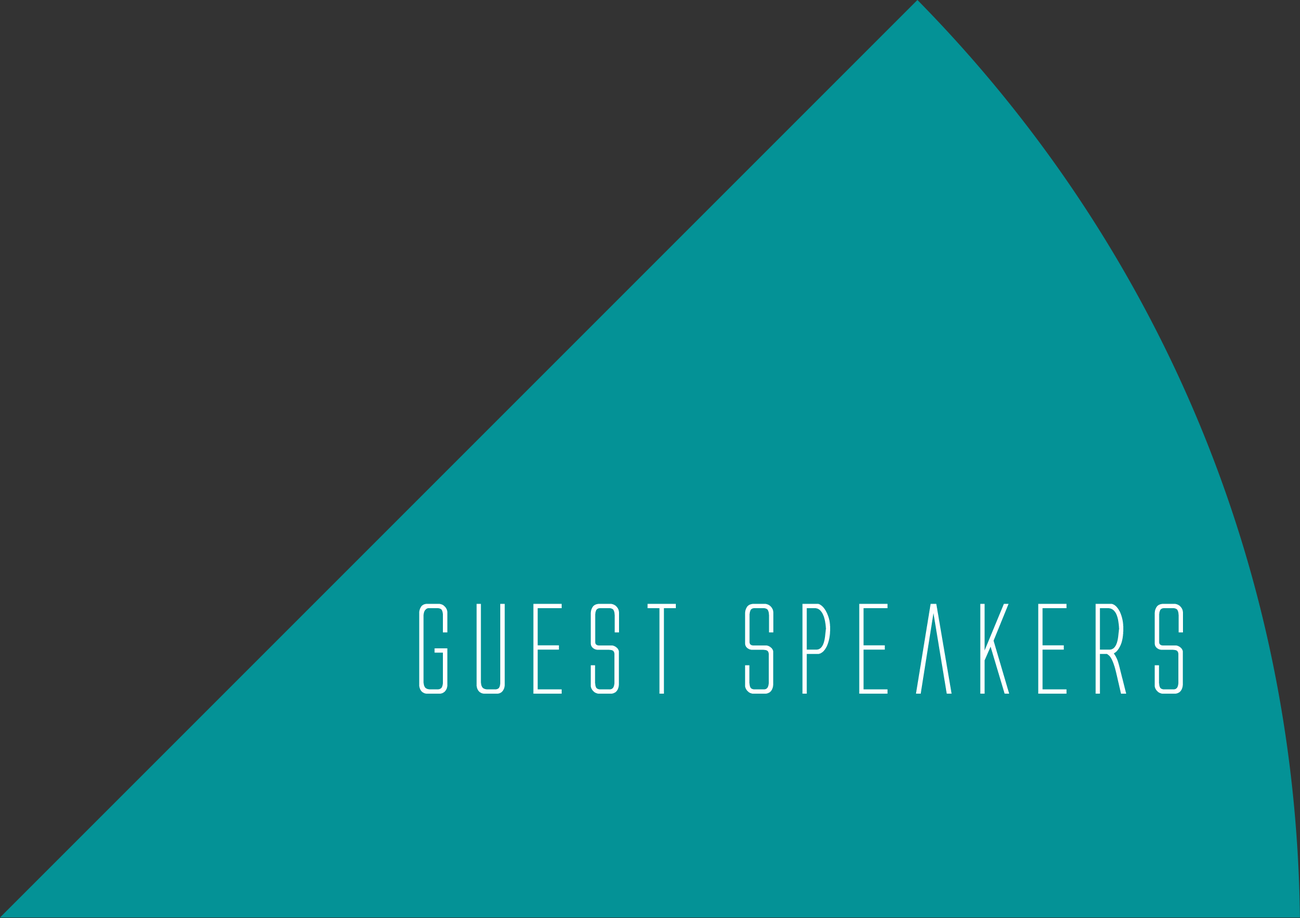
<style>
.page{position:relative;width:1300px;height:918px;background:#049296}
.page>*{position:absolute;margin:0}
.t1{font:119.5px "AlienLeagueExpanded";color:#ffffff;scale:0.89 1}
</style>
<div class="page">
<p class="t1" style="left:419px;top:603px;width:764px;height:90px">Guest Speakers</p>
</div>
